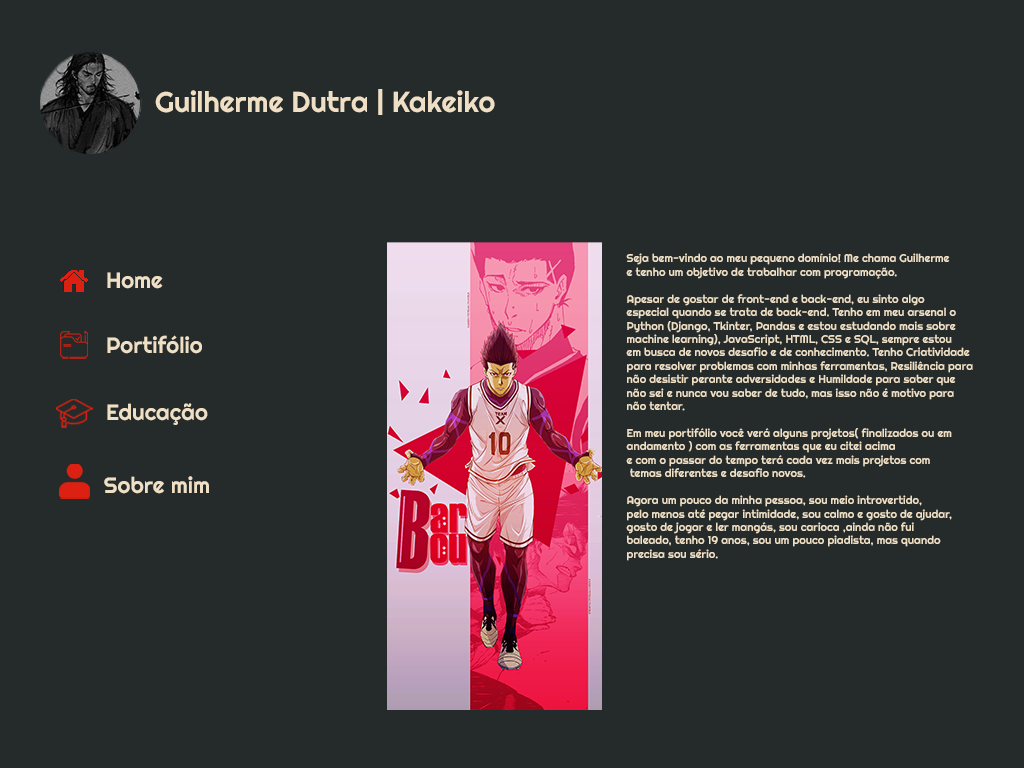
<style>
.page{position:relative;width:1024px;height:768px;background:#252b2b}
.page>*{position:absolute;margin:0}
.t1{font:28.7px "Righteous-Regular";color:#efdfc5}
.t2{font:11.2px "Righteous-Regular";color:#efdfc5}
.t3{font:22.3px "Righteous-Regular";color:#efdfc5}
</style>
<div class="page">
<p class="t1" style="left:155px;top:89px;width:340px;height:26px">Guilherme Dutra | Kakeiko</p>
<p class="t2" style="left:626px;top:253px;width:347px;height:308px">Seja bem-vindo ao meu pequeno domínio! Me chama Guilherme<br>e tenho um objetivo de trabalhar com programação.<br><br>Apesar de gostar de front-end e back-end, eu sinto algo <br>especial quando se trata de back-end. Tenho em meu arsenal o <br>Python (Django, Tkinter, Pandas e estou estudando mais sobre<br>machine learning), JavaScript, HTML, CSS e SQL, sempre estou<br>em busca de novos desafio e de conhecimento. Tenho Criatividade<br>para resolver problemas com minhas ferramentas, Resiliência para <br>não desistir perante adversidades e Humildade para saber que<br>não sei e nunca vou saber de tudo, mas isso não é motivo para <br>não tentar.<br><br>Em meu portifólio você verá alguns projetos( finalizados ou em <br>andamento ) com as ferramentas que eu citei acima<br>e com o passar do tempo terá cada vez mais projetos com<br> temas diferentes e desafio novos.<br><br>Agora um pouco da minha pessoa, sou meio introvertido,<br>pelo menos até pegar intimidade, sou calmo e gosto de ajudar,<br>gosto de jogar e ler mangás, sou carioca ,ainda não fui<br>baleado, tenho 19 anos, sou um pouco piadista, mas quando <br>precisa sou sério.</p>
<p class="t3" style="left:107px;top:272px;width:56px;height:17px">Home</p>
<p class="t3" style="left:107px;top:335px;width:95px;height:19px">Portifólio</p>
<p class="t3" style="left:107px;top:403px;width:101px;height:22px">Educação</p>
<p class="t3" style="left:104px;top:476px;width:105px;height:18px">Sobre mim</p>
</div>
